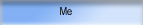
<style>
.page{position:relative;width:143px;height:25px}
.page>*{position:absolute;margin:0}
.t1{font:11px "ArialNarrow";color:#000000}
</style>
<div class="page">
<p class="t1" style="left:60px;top:7px;width:12px;height:8px">Me</p>
</div>
